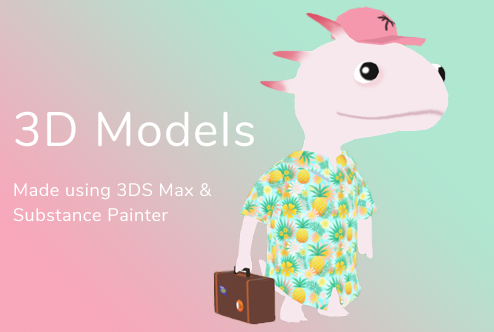
<style>
.page{position:relative;width:494px;height:332px}
.page>*{position:absolute;margin:0}
.t1{font:18px/25px "Nunito-Regular";letter-spacing:0.03em;color:#ffffff}
.t2{font:48px/25px "Nunito-Regular";letter-spacing:0.03em;color:#ffffff}
</style>
<div class="page">
<p class="t1" style="left:13px;top:111px;width:241px;height:111px"><span class="t2">3D Models<br><br></span>Made using 3DS Max &amp;<br>Substance Painter</p>
</div>
